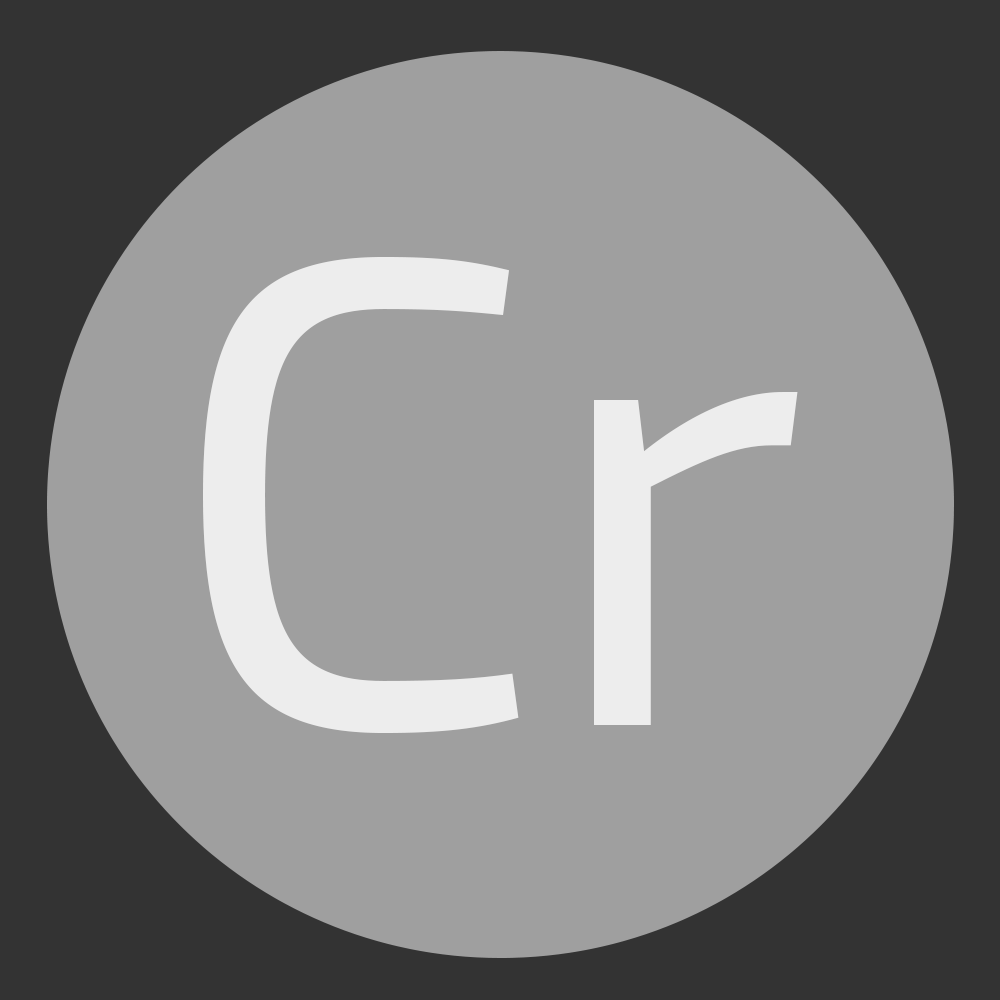
<style>
.page{position:relative;width:1000px;height:1000px;background:#9f9f9f}
.page>*{position:absolute;margin:0}
.t1{font:666.7px "Exo2-Regular";color:#ededed}
</style>
<div class="page">
<p class="t1" style="left:203px;top:257px;width:595px;height:476px">Cr</p>
</div>
